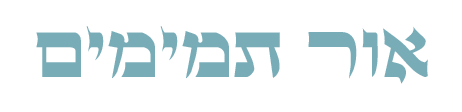
<style>
.page{position:relative;width:462px;height:112px;background:#ffffff}
.page>*{position:absolute;margin:0}
.t1{font:87px "StamAshkenazCLM";color:#78adb8}
</style>
<div class="page">
<p class="t1" style="left:36px;top:26px;width:392px;height:58px">םימימת רוא</p>
</div>
